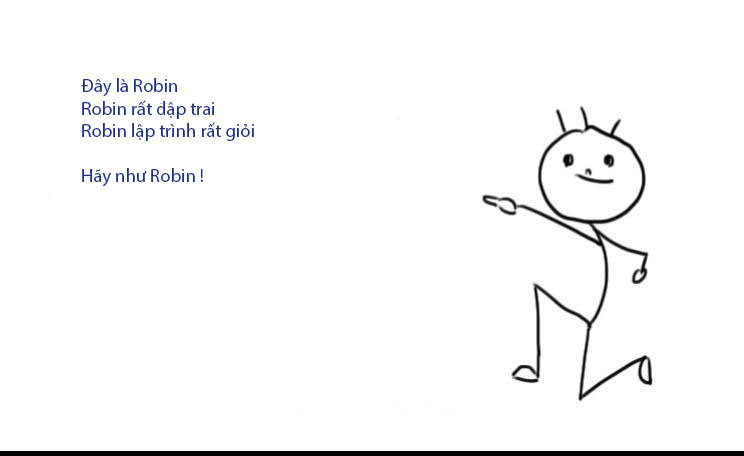
<style>
.page{position:relative;width:744px;height:456px;background:#ffffff}
.page>*{position:absolute;margin:0}
.t1{font:18.7px "MyriadPro-Regular";color:#1e3089}
</style>
<div class="page">
<p class="t1" style="left:81px;top:78px;width:173px;height:109px">Đây là Robin<br>Robin rất đập trai<br>Robin lập trình rất giỏi <br><br>Hãy như Robin !</p>
</div>
